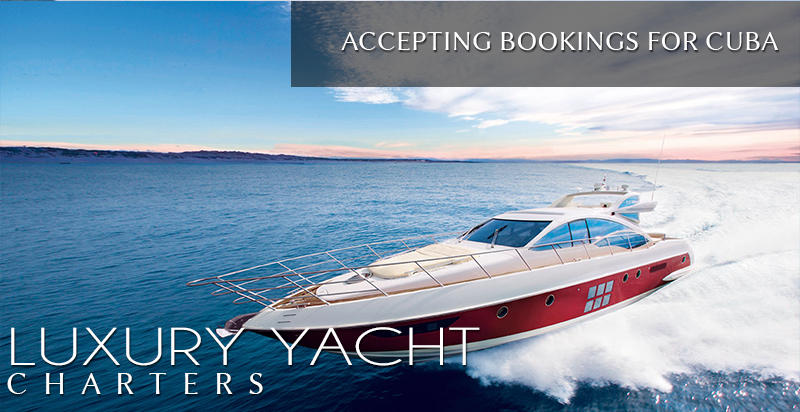
<style>
.page{position:relative;width:800px;height:412px}
.page>*{position:absolute;margin:0}
.t1{font:27.9px "LinBiolinum";color:#fefeff;text-transform:uppercase}
.t2{font:54px "Champagne&Limousines";letter-spacing:0.02em;color:#ffffff;text-transform:uppercase;scale:1.43 1}
.t3{font:32.1px "LinBiolinum";letter-spacing:0.44em;color:#ffffff;text-transform:uppercase}
</style>
<div class="page">
<p class="t1" style="left:341px;top:32px;width:437px;height:18px">Accepting bookings for cuba</p>
<p class="t2" style="left:11px;top:327px;width:469px;height:39px">Luxury Yacht</p>
<p class="t3" style="left:7px;top:373px;width:256px;height:21px">Charters</p>
</div>
